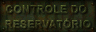
<style>
.page{position:relative;width:96px;height:32px}
.page>*{position:absolute;margin:0}
.t1{font:11px/15px "Arial-BoldMT";color:#36391c;font-weight:bold;scale:0.96 1}
</style>
<div class="page">
<p class="t1" style="left:5px;top:5px;width:86px;height:24px;text-align:center">CONTROLE DO <br>RESERVATÓRIO</p>
</div>
